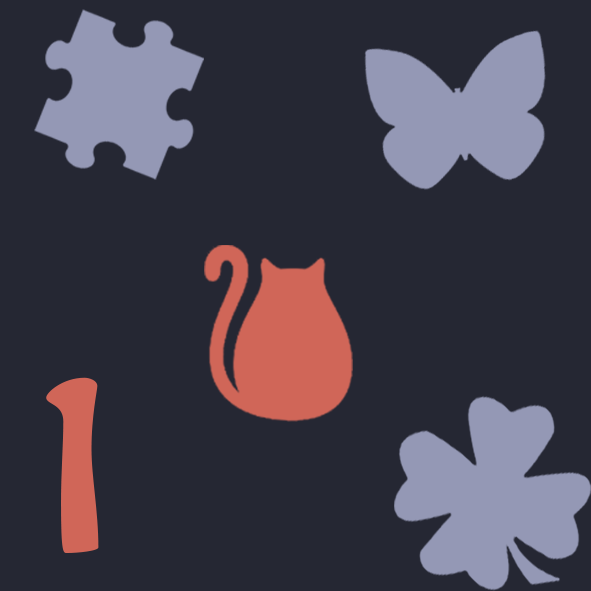
<style>
.page{position:relative;width:591px;height:591px;background:#252733}
.page>*{position:absolute;margin:0}
.t1{font:208.3px "HoboStd";color:#d06658}
</style>
<div class="page">
<p class="t1" style="left:46px;top:377px;width:53px;height:176px">1</p>
</div>
